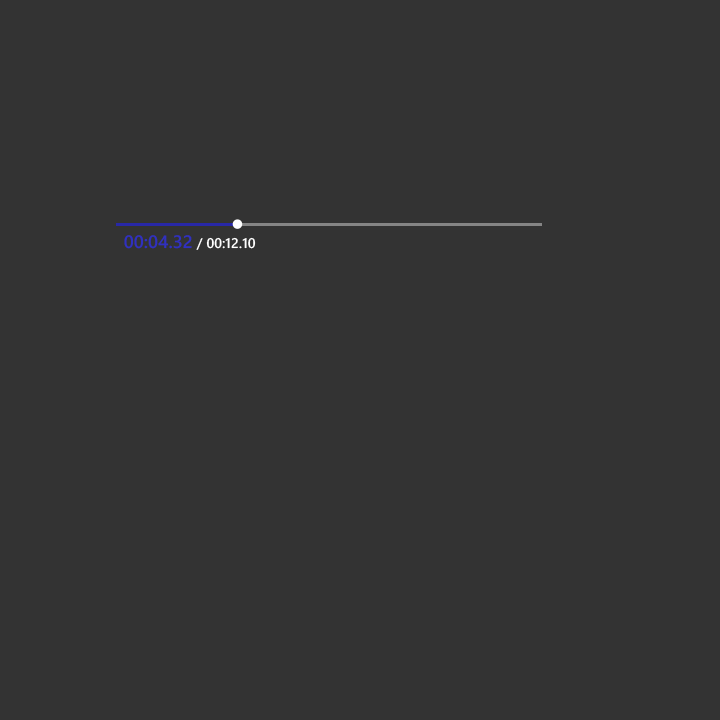
<style>
.page{position:relative;width:720px;height:720px;background:#333333}
.page>*{position:absolute;margin:0}
.t1{font:14px "SegoeWP-Semibold";color:#ffffff}
.t2{font:18px "SegoeWP-Semibold";color:#3030c1}
</style>
<div class="page">
<p class="t1" style="left:124px;top:235px;width:132px;height:15px"><span class="t2">00:04.32</span> / 00:12.10</p>
</div>
